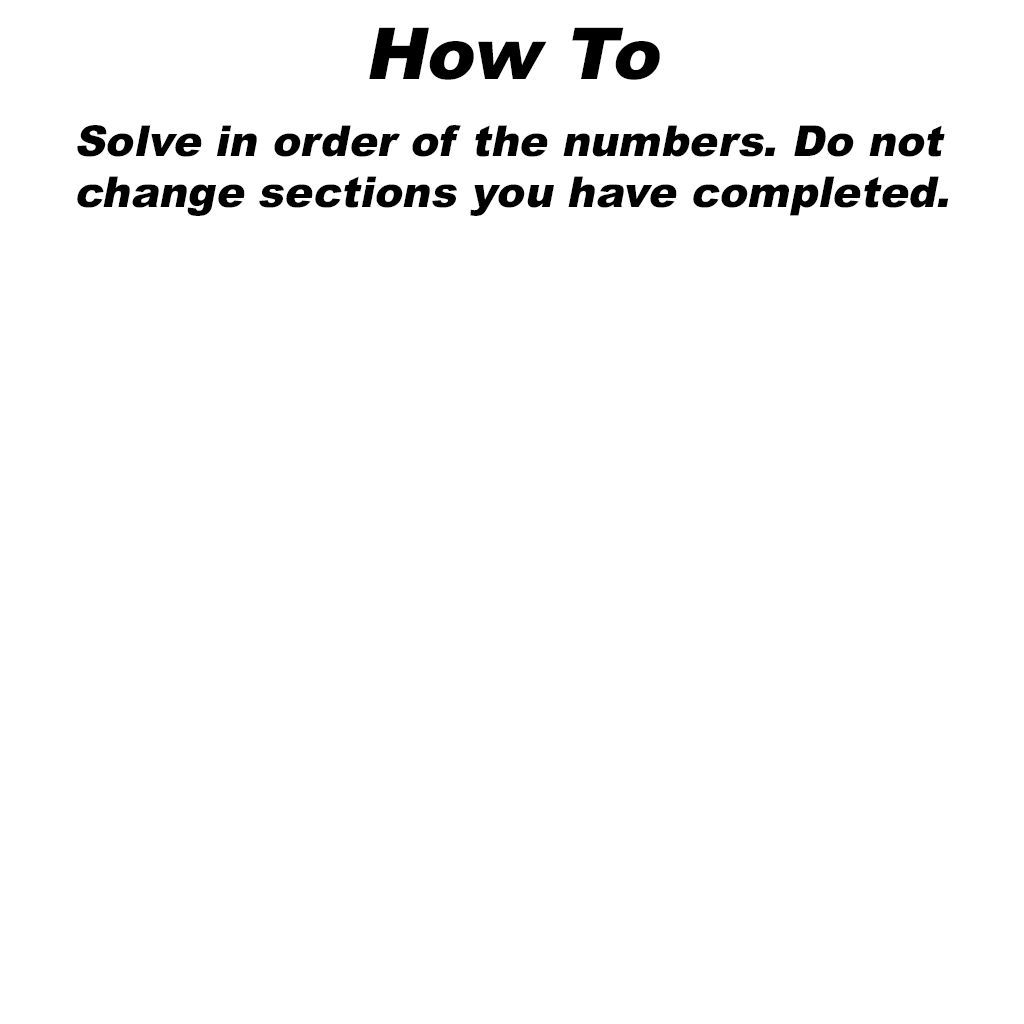
<style>
.page{position:relative;width:1024px;height:1024px;background:#ffffff}
.page>*{position:absolute;margin:0}
.t1{font:71.9px "Arial-Black";color:#000000;font-style:italic}
.t2{font:42.5px "Arial-Black";color:#000000;font-style:italic}
</style>
<div class="page">
<p class="t1" style="left:369px;top:27px;width:291px;height:53px">How To</p>
<p class="t2" style="left:77px;top:125px;width:872px;height:91px">Solve in order of the numbers. Do not <br>change sections you have completed.</p>
</div>
